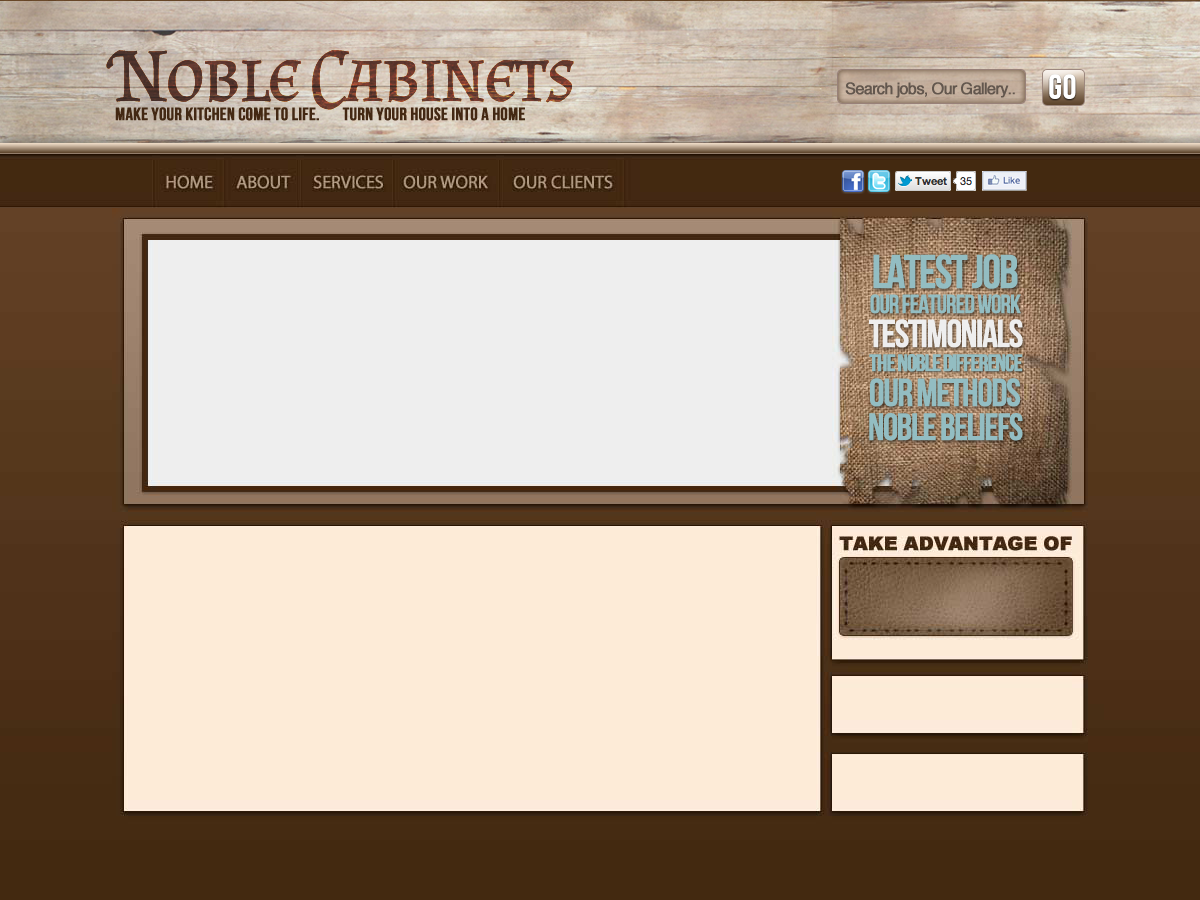
<style>
.page{position:relative;width:1200px;height:900px}
.page>*{position:absolute;margin:0}
.t1{font:75px "AlmendraSC-Regular";letter-spacing:-0.06em;font-weight:bold}
.t2{font:34px "BebasNeue";color:#ffffff;font-weight:bold}
.t3{font:16px "Helvetica";letter-spacing:-0.06em;color:#63574e;font-weight:bold}
.t4{font:18px "BebasNeue";color:#432813;font-weight:bold}
.t5{font:47px "BebasNeue";letter-spacing:-0.06em;color:#93bdc2;font-weight:bold}
.t6{font:26px "BebasNeue";letter-spacing:-0.06em;color:#93bdc2;font-weight:bold}
.t7{font:39px "BebasNeue";letter-spacing:-0.06em;color:#eeeeee;font-weight:bold}
.t8{font:24px "BebasNeue";letter-spacing:-0.06em;color:#93bdc2;font-weight:bold}
.t9{font:39px "BebasNeue";letter-spacing:-0.06em;color:#93bdc2;font-weight:bold}
.t10{font:38px "BebasNeue";letter-spacing:-0.06em;color:#93bdc2;font-weight:bold}
</style>
<div class="page">
<p class="t1" style="left:106px;top:50px;width:468px;height:60px">Noble Cabinets</p>
<p class="t1" style="left:106px;top:50px;width:468px;height:60px">Noble Cabinets</p>
<p class="t1" style="left:106px;top:50px;width:468px;height:60px">Noble Cabinets</p>
<p class="t1" style="left:106px;top:50px;width:468px;height:60px">Noble Cabinets</p>
<p class="t2" style="left:1049px;top:74px;width:27px;height:25px">GO</p>
<p class="t3" style="left:845px;top:82px;width:170px;height:16px">Search jobs, Our Gallery..</p>
<p class="t4" style="left:115px;top:107px;width:410px;height:14px">Make your kitchen come to life.       Turn your house into a home</p>
<p class="t5" style="left:873px;top:254px;width:145px;height:35px">Latest Job</p>
<p class="t6" style="left:870px;top:294px;width:151px;height:20px">Our Featured Work</p>
<p class="t7" style="left:869px;top:319px;width:154px;height:29px">Testimonials</p>
<p class="t8" style="left:869px;top:354px;width:154px;height:18px">The noble difference</p>
<p class="t9" style="left:870px;top:378px;width:151px;height:29px">Our methods</p>
<p class="t10" style="left:869px;top:413px;width:154px;height:28px">Noble Beliefs</p>
</div>
